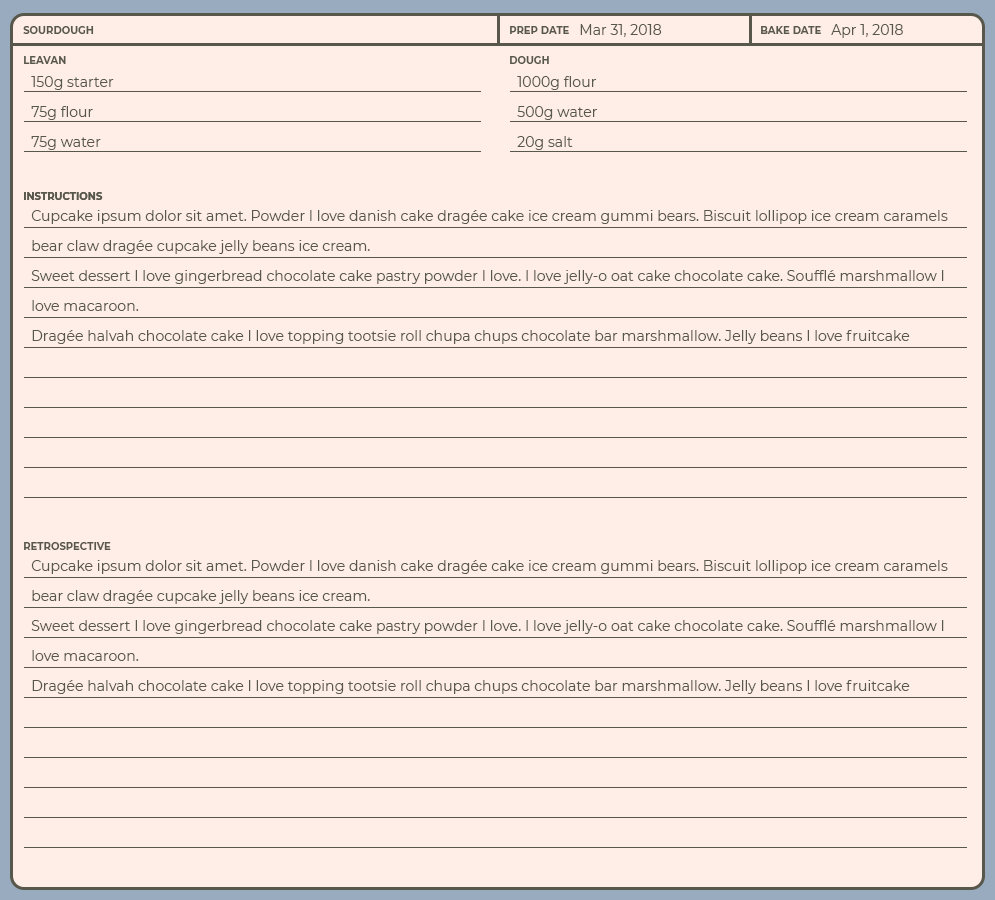
<style>
.page{position:relative;width:995px;height:900px;background:#feeee7}
.page>*{position:absolute;margin:0}
.t1{font:10px "Montserrat-Bold";letter-spacing:0.005em;color:#58574b;text-transform:uppercase}
.t2{font:14px "Montserrat-Regular";letter-spacing:0.005em;color:#58574b}
.t3{font:14px/30px "Montserrat-Regular";letter-spacing:0.005em;color:#58574b}
</style>
<div class="page">
<p class="t1" style="left:23px;top:26px;width:71px;height:8px">SOURDOUGH</p>
<p class="t1" style="left:510px;top:26px;width:59px;height:8px">PREP DATE</p>
<p class="t2" style="left:580px;top:24px;width:82px;height:13px">Mar 31, 2018</p>
<p class="t1" style="left:761px;top:26px;width:60px;height:8px">BAKE DATE</p>
<p class="t2" style="left:831px;top:24px;width:72px;height:14px">Apr 1, 2018</p>
<p class="t1" style="left:24px;top:56px;width:42px;height:8px">LEAVAN</p>
<p class="t1" style="left:510px;top:56px;width:39px;height:8px">DOUGH</p>
<p class="t2" style="left:31px;top:76px;width:83px;height:14px">150g starter</p>
<p class="t2" style="left:517px;top:76px;width:79px;height:14px">1000g flour</p>
<p class="t2" style="left:31px;top:106px;width:62px;height:14px">75g flour</p>
<p class="t2" style="left:517px;top:106px;width:80px;height:14px">500g water</p>
<p class="t2" style="left:31px;top:136px;width:70px;height:14px">75g water</p>
<p class="t2" style="left:517px;top:136px;width:56px;height:14px">20g salt</p>
<p class="t1" style="left:24px;top:192px;width:79px;height:8px">INSTRUCTIONS</p>
<p class="t1" style="left:24px;top:192px;width:79px;height:8px">INSTRUCTIONS</p>
<p class="t3" style="left:31px;top:210px;width:917px;height:134px">Cupcake ipsum dolor sit amet. Powder I love danish cake dragée cake ice cream gummi bears. Biscuit lollipop ice cream caramels bear claw dragée cupcake jelly beans ice cream.<br>Sweet dessert I love gingerbread chocolate cake pastry powder I love. I love jelly-o oat cake chocolate cake. Soufflé marshmallow I love macaroon.<br>Dragée halvah chocolate cake I love topping tootsie roll chupa chups chocolate bar marshmallow. Jelly beans I love fruitcake jujubes dragée. Cookie icing muffin sweet halvah cupcake cookie. Brownie halvah chocolate bar jelly I love.<br>Candy pudding wafer lollipop chocolate cake cookie danish oat cake gummi bears. Sweet jelly candy canes cookie cookie cheesecake. Chocolate cake soufflé jelly beans. Chocolate wafer powder macaroon apple pie lollipop pie jelly.<br>I love sweet jelly caramels toffee chocolate gummies candy gummies. I love I love sugar plum donut macaroon apple pie candy canes. Cake fruitcake macaroon biscuit tootsie roll I love tart.</p>
<p class="t1" style="left:24px;top:542px;width:87px;height:8px">RETROSPECTIVE</p>
<p class="t3" style="left:31px;top:560px;width:917px;height:134px">Cupcake ipsum dolor sit amet. Powder I love danish cake dragée cake ice cream gummi bears. Biscuit lollipop ice cream caramels bear claw dragée cupcake jelly beans ice cream.<br>Sweet dessert I love gingerbread chocolate cake pastry powder I love. I love jelly-o oat cake chocolate cake. Soufflé marshmallow I love macaroon.<br>Dragée halvah chocolate cake I love topping tootsie roll chupa chups chocolate bar marshmallow. Jelly beans I love fruitcake jujubes dragée. Cookie icing muffin sweet halvah cupcake cookie. Brownie halvah chocolate bar jelly I love.<br>Candy pudding wafer lollipop chocolate cake cookie danish oat cake gummi bears. Sweet jelly candy canes cookie cookie cheesecake. Chocolate cake soufflé jelly beans. Chocolate wafer powder macaroon apple pie lollipop pie jelly.<br>I love sweet jelly caramels toffee chocolate gummies candy gummies. I love I love sugar plum donut macaroon apple pie candy canes. Cake fruitcake macaroon biscuit tootsie roll I love tart.</p>
</div>
